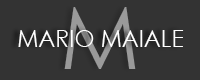
<style>
.page{position:relative;width:200px;height:80px;background:#333333}
.page>*{position:absolute;margin:0}
.t1{font:87.1px "CenturyGothic";color:#9a9a9a}
.t2{font:22.9px "CenturyGothic";color:#ffffff}
</style>
<div class="page">
<p class="t1" style="left:64px;top:7px;width:72px;height:62px">M</p>
<p class="t2" style="left:18px;top:30px;width:166px;height:17px">MARIO MAIALE</p>
</div>
